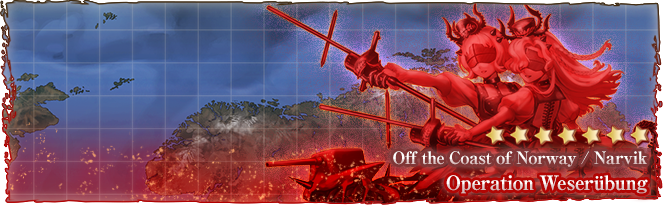
<style>
.page{position:relative;width:663px;height:205px}
.page>*{position:absolute;margin:0}
.t1{font:17px "RyuminPro-ExBold";letter-spacing:-0.04em}
.t2{font:20px "RyuminPro-ExBold";letter-spacing:-0.04em}
</style>
<div class="page">
<p class="t1" style="left:393px;top:151px;width:254px;height:16px">Off the Coast of Norway / Narvik</p>
<p class="t2" style="left:446px;top:175px;width:202px;height:19px">Operation Weserübung</p>
</div>
